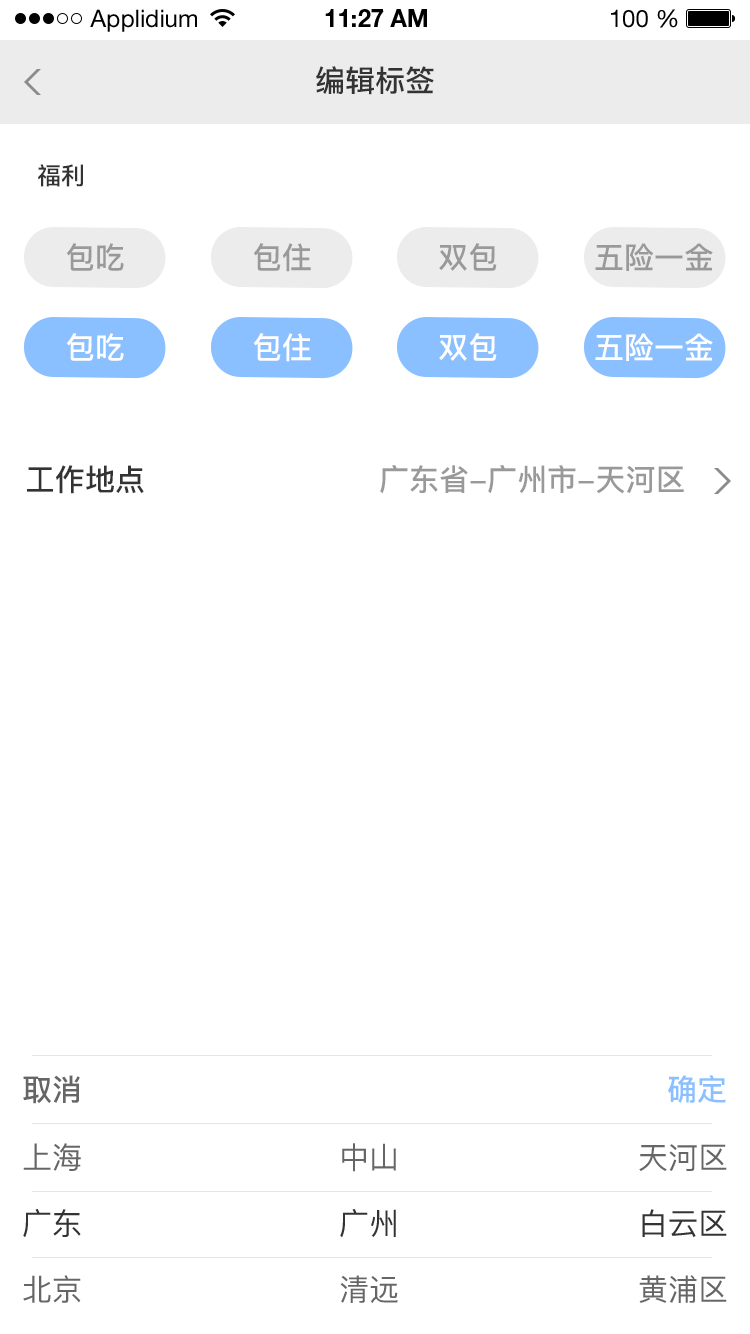
<style>
.page{position:relative;width:750px;height:1334px;background:#ffffff}
.page>*{position:absolute;margin:0}
.t1{font:24px "HelveticaNeueLTStd-Roman";color:#000000}
.t2{font:24px "HelveticaNeueLTStd-Bd";color:#000000}
.t3{font:30px "PingFang-SC-Bold";color:#333333}
.t4{font:24px "PingFang-SC-Bold";color:#333333}
.t5{font:30px "PingFang-SC-Bold";color:#999999}
.t6{font:30px "PingFang-SC-Bold";color:#ffffff}
.t7{font:30px "PingFang-SC-Bold";color:#666666}
.t8{font:30px "PingFang-SC-Bold";color:#8ac0ff}
.t9{font:30px "PingFang-SC-Medium";color:#666666}
.t10{font:30px "PingFang-SC-Medium";color:#333333}
</style>
<div class="page">
<p class="t1" style="left:90px;top:9px;width:107px;height:23px">Applidium</p>
<p class="t2" style="left:325px;top:9px;width:102px;height:18px">11:27 AM</p>
<p class="t1" style="left:611px;top:9px;width:67px;height:19px">100 %</p>
<p class="t3" style="left:316px;top:66px;width:118px;height:29px">编辑标签</p>
<p class="t4" style="left:38px;top:164px;width:45px;height:23px">福利</p>
<p class="t5" style="left:66px;top:243px;width:58px;height:28px">包吃</p>
<p class="t5" style="left:253px;top:243px;width:58px;height:29px">包住</p>
<p class="t5" style="left:439px;top:243px;width:58px;height:28px">双包</p>
<p class="t5" style="left:595px;top:243px;width:118px;height:28px">五险一金</p>
<p class="t6" style="left:66px;top:333px;width:58px;height:28px">包吃</p>
<p class="t6" style="left:253px;top:333px;width:58px;height:29px">包住</p>
<p class="t6" style="left:439px;top:333px;width:58px;height:28px">双包</p>
<p class="t6" style="left:595px;top:333px;width:118px;height:28px">五险一金</p>
<p class="t3" style="left:27px;top:465px;width:117px;height:29px">工作地点</p>
<p class="t5" style="left:380px;top:465px;width:304px;height:29px">广东省-广州市-天河区</p>
<p class="t7" style="left:23px;top:1075px;width:57px;height:29px">取消</p>
<p class="t8" style="left:668px;top:1075px;width:58px;height:28px">确定</p>
<p class="t9" style="left:23px;top:1143px;width:58px;height:28px">上海</p>
<p class="t9" style="left:342px;top:1143px;width:54px;height:29px">中山</p>
<p class="t9" style="left:639px;top:1144px;width:88px;height:27px">天河区</p>
<p class="t10" style="left:23px;top:1209px;width:58px;height:28px">广东</p>
<p class="t10" style="left:340px;top:1209px;width:56px;height:28px">广州</p>
<p class="t10" style="left:642px;top:1209px;width:85px;height:29px">白云区</p>
<p class="t9" style="left:23px;top:1275px;width:58px;height:28px">北京</p>
<p class="t9" style="left:340px;top:1275px;width:58px;height:28px">清远</p>
<p class="t9" style="left:639px;top:1275px;width:88px;height:28px">黄浦区</p>
</div>
